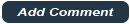
<style>
.page{position:relative;width:130px;height:24px;background:#233645}
.page>*{position:absolute;margin:0}
.t1{font:11.2px "Arial-BoldItalicMT";color:#fefefe;scale:1.25 1}
</style>
<div class="page">
<p class="t1" style="left:17px;top:8px;width:97px;height:8px">Add Comment</p>
</div>
